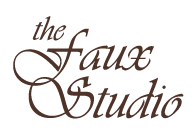
<style>
.page{position:relative;width:195px;height:137px;background:#ffffff}
.page>*{position:absolute;margin:0}
.t1{font:60px/48px "Vivaldii";color:#4f3328}
.t2{font:36px/30px "Vivaldii";color:#4f3328}
.t3{font:60px/30px "Vivaldii";color:#4f3328}
</style>
<div class="page">
<p class="t1" style="left:13px;top:16px;width:171px;height:103px;text-align:right"><span class="t2">the             <br></span><span class="t3">Faux  <br></span>Studio</p>
</div>
